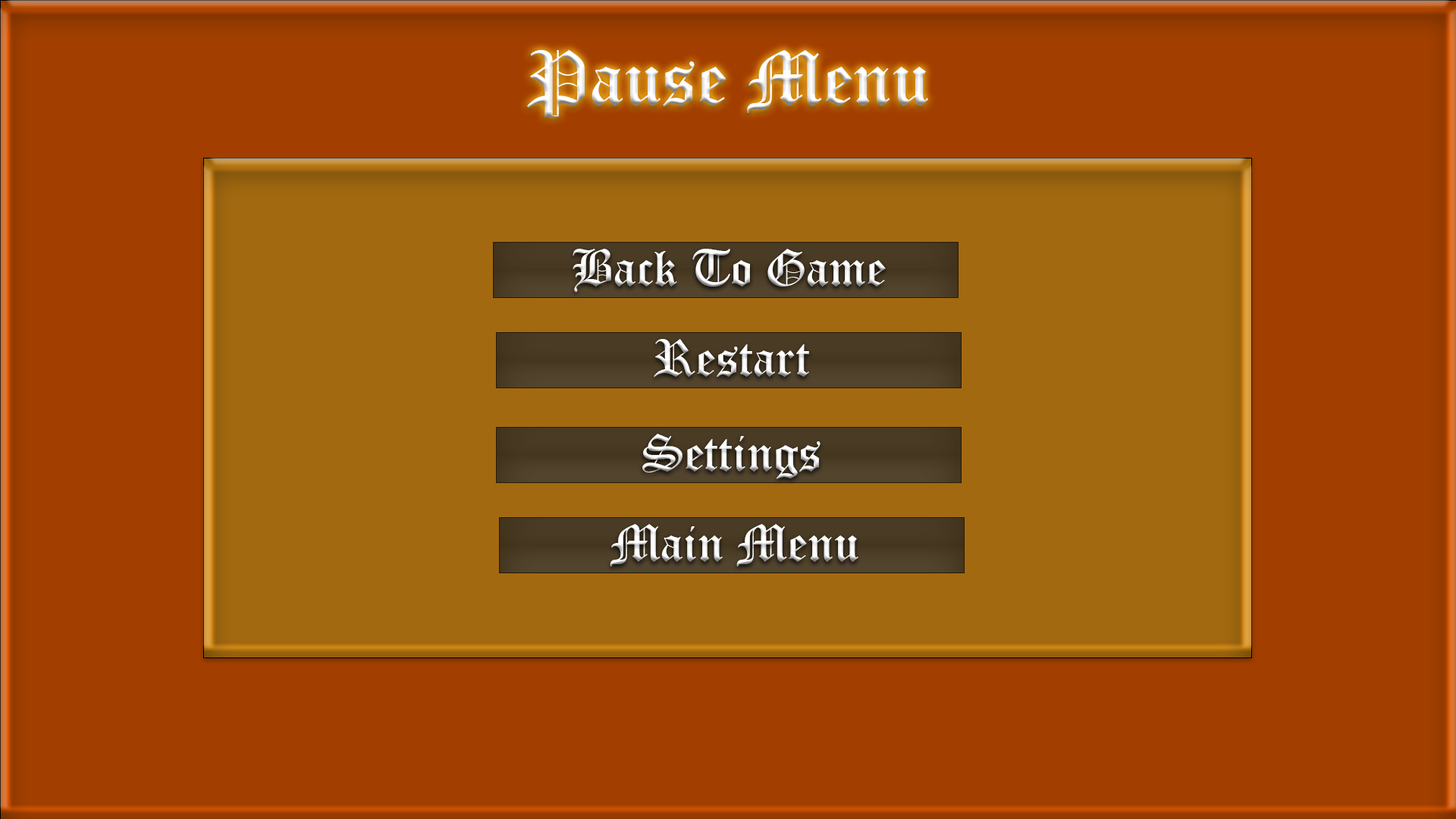
<style>
.page{position:relative;width:1456px;height:819px;background:#a23f00}
.page>*{position:absolute;margin:0}
.t1{font:75.8px "OldEnglishTextMT";color:#ffffff}
.t2{font:50.6px "OldEnglishTextMT";color:#ffffff}
</style>
<div class="page">
<p class="t1" style="left:527px;top:50px;width:401px;height:67px">Pause Menu</p>
<p class="t2" style="left:573px;top:249px;width:313px;height:43px">Back To Game</p>
<p class="t2" style="left:654px;top:339px;width:155px;height:38px">Restart</p>
<p class="t2" style="left:642px;top:434px;width:179px;height:45px">Settings</p>
<p class="t2" style="left:610px;top:524px;width:248px;height:42px">Main Menu</p>
</div>
